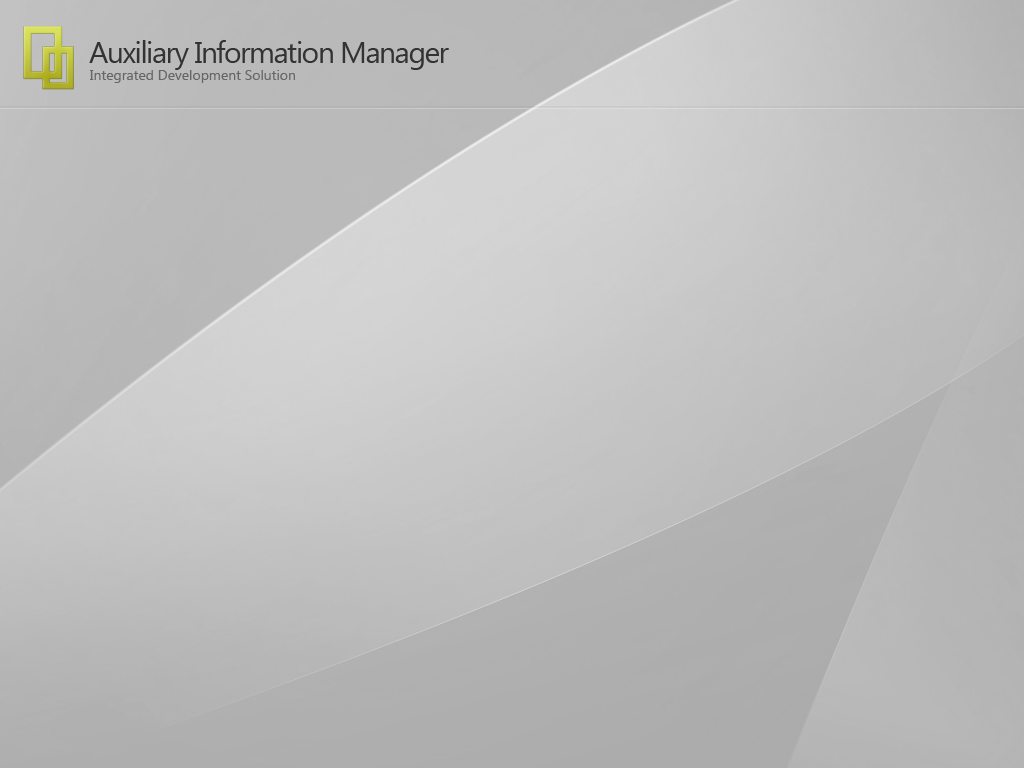
<style>
.page{position:relative;width:1024px;height:768px}
.page>*{position:absolute;margin:0}
.t1{font:30px "SegoeUI";letter-spacing:-0.05em;color:#333333}
.t2{font:14px "SegoeUI";color:#666666}
</style>
<div class="page">
<p class="t1" style="left:89px;top:40px;width:360px;height:30px">Auxiliary Information Manager</p>
<p class="t2" style="left:90px;top:70px;width:205px;height:13px">Integrated Development Solution</p>
</div>
